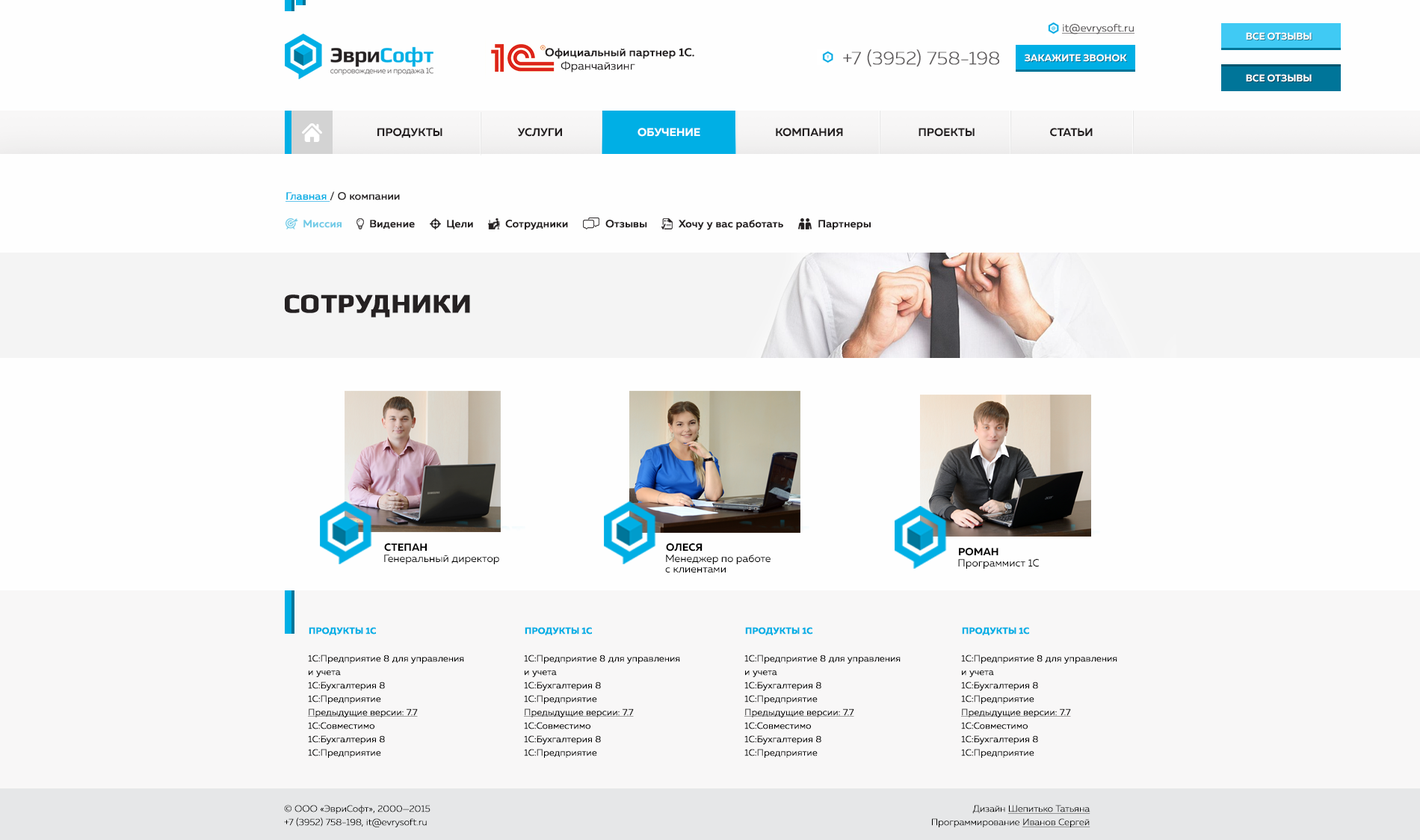
<style>
.page{position:relative;width:1420px;height:840px;background:#fefefe}
.page>*{position:absolute;margin:0}
.t1{font:10.5px "MullerLight";color:#5c595a;font-weight:bold;text-decoration:underline}
.t2{font:9.8px "MullerBold";color:#ffffff}
.t3{font:11.2px/13.5px "MullerMedium";color:#231f20;font-weight:bold}
.t4{font:11.2px/13.5px "MullerLight";color:#231f20;font-weight:bold}
.t5{font:18.3px "MullerUltraLight";color:#5c595a;font-weight:bold}
.t6{font:11.2px "MullerBold";color:#231f20}
.t7{font:11.2px "MullerBold";color:#ffffff}
.t8{font:10.5px "MullerRegular";color:#252122;font-weight:bold}
.t9{font:10.5px "MullerRegular";color:#00afe5;font-weight:bold;text-decoration:underline}
.t10{font:10.5px "MullerMedium";color:#72cbe7;font-weight:bold}
.t11{font:10.5px "MullerMedium";color:#231f20;font-weight:bold}
.t12{font:26.9px "Play-Bold";color:#252122;font-weight:bold}
.t13{font:10.5px "MullerBold";color:#000000}
.t14{font:10.5px "MullerRegular";color:#000000}
.t15{font:10.5px/10.5px "MullerRegular";color:#000000}
.t16{font:9px "MullerBold";color:#00afe5;font-weight:bold}
.t17{font:9px/13.5px "MullerLight";color:#000000;font-weight:bold}
.t18{font:9px/13.5px "MullerLight";color:#000000;font-weight:bold;text-decoration:underline}
.t19{font:9px/13.5px "MullerUltraLight";color:#000000;font-weight:bold}
.t20{font:9px/13.5px "MullerUltraLight";color:#000000;font-weight:bold;text-decoration:underline}
</style>
<div class="page">
<p class="t1" style="left:1062px;top:24px;width:72px;height:10px">it@evrysoft.ru</p>
<p class="t2" style="left:1246px;top:32px;width:65px;height:8px">ВСЕ ОТЗЫВЫ</p>
<p class="t3" style="left:545px;top:48px;width:149px;height:24px">Официальный партнер 1С.<span class="t4"> <br>     Франчайзинг</span></p>
<p class="t5" style="left:843px;top:49px;width:156px;height:18px">+7 (3952) 758-198</p>
<p class="t2" style="left:1024px;top:54px;width:103px;height:8px">ЗАКАЖИТЕ ЗВОНОК</p>
<p class="t2" style="left:1246px;top:74px;width:65px;height:8px">ВСЕ ОТЗЫВЫ</p>
<p class="t6" style="left:377px;top:128px;width:715px;height:10px">ПРОДУКТЫ                              УСЛУГИ                         <span class="t7">     ОБУЧЕНИЕ</span>                              КОМПАНИЯ                              ПРОЕКТЫ                              СТАТЬИ</p>
<p class="t8" style="left:285px;top:191px;width:115px;height:11px"><span class="t9">Главная </span>/ О компании</p>
<p class="t10" style="left:303px;top:220px;width:38px;height:8px">Миссия</p>
<p class="t11" style="left:370px;top:220px;width:45px;height:9px">Видение</p>
<p class="t11" style="left:447px;top:220px;width:26px;height:9px">Цели</p>
<p class="t11" style="left:505px;top:220px;width:63px;height:10px">Сотрудники</p>
<p class="t11" style="left:605px;top:220px;width:42px;height:8px">Отзывы</p>
<p class="t11" style="left:678px;top:220px;width:105px;height:10px">Хочу у вас работать</p>
<p class="t11" style="left:818px;top:220px;width:53px;height:10px">Партнеры</p>
<p class="t12" style="left:285px;top:294px;width:185px;height:24px">СОТРУДНИКИ</p>
<p class="t13" style="left:384px;top:543px;width:43px;height:8px">СТЕПАН</p>
<p class="t13" style="left:666px;top:543px;width:36px;height:8px">ОЛЕСЯ</p>
<p class="t14" style="left:384px;top:554px;width:115px;height:10px">Генеральный директор</p>
<p class="t15" style="left:665px;top:554px;width:105px;height:19px">Менеджер по работе<br>с клиентами</p>
<p class="t13" style="left:959px;top:548px;width:39px;height:8px">РОМАН</p>
<p class="t14" style="left:958px;top:559px;width:81px;height:10px">Программист 1С</p>
<p class="t16" style="left:309px;top:627px;width:67px;height:8px">ПРОДУКТЫ 1С</p>
<p class="t16" style="left:525px;top:627px;width:67px;height:8px">ПРОДУКТЫ 1С</p>
<p class="t16" style="left:745px;top:627px;width:67px;height:8px">ПРОДУКТЫ 1С</p>
<p class="t16" style="left:962px;top:627px;width:67px;height:8px">ПРОДУКТЫ 1С</p>
<p class="t17" style="left:308px;top:655px;width:156px;height:103px">1С:Предприятие 8 для управления и учета<br>1С:Бухгалтерия 8 <br>1С:Предприятие <br><span class="t18">Предыдущие версии: 7.7<br></span>1С:Совместимо<br>1С:Бухгалтерия 8 <br>1С:Предприятие</p>
<p class="t17" style="left:524px;top:655px;width:156px;height:103px">1С:Предприятие 8 для управления и учета<br>1С:Бухгалтерия 8 <br>1С:Предприятие <br><span class="t18">Предыдущие версии: 7.7<br></span>1С:Совместимо<br>1С:Бухгалтерия 8 <br>1С:Предприятие</p>
<p class="t17" style="left:744px;top:655px;width:156px;height:103px">1С:Предприятие 8 для управления и учета<br>1С:Бухгалтерия 8 <br>1С:Предприятие <br><span class="t18">Предыдущие версии: 7.7<br></span>1С:Совместимо<br>1С:Бухгалтерия 8 <br>1С:Предприятие</p>
<p class="t17" style="left:961px;top:655px;width:156px;height:103px">1С:Предприятие 8 для управления и учета<br>1С:Бухгалтерия 8 <br>1С:Предприятие <br><span class="t18">Предыдущие версии: 7.7<br></span>1С:Совместимо<br>1С:Бухгалтерия 8 <br>1С:Предприятие</p>
<p class="t19" style="left:284px;top:805px;width:146px;height:22px">© ООО «ЭвриСофт», 2000—2015<br>+7 (3952) 758-198, it@evrysoft.ru</p>
<p class="t20" style="left:932px;top:805px;width:158px;height:22px;text-align:right"><span class="t19">Дизайн </span>Шепитько Татьяна<br><span class="t19">Программирование </span>Иванов Сергей</p>
</div>
